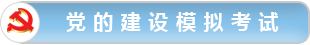
<style>
.page{position:relative;width:310px;height:45px}
.page>*{position:absolute;margin:0}
.t1{font:20px "MicrosoftYaHei-Bold";letter-spacing:0.04em;color:#ffffff}
</style>
<div class="page">
<p class="t1" style="left:66px;top:12px;width:213px;height:20px">党 的 建 设 模 拟 考 试</p>
</div>
